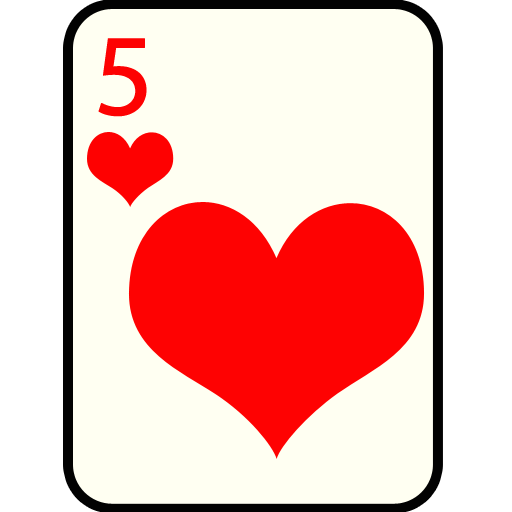
<style>
.page{position:relative;width:512px;height:512px;background:#fffff2}
.page>*{position:absolute;margin:0}
.t1{font:200px "MyriadPro-Regular";letter-spacing:-0.05em;color:#fd0202;font-variant:small-caps;font-weight:bold}
</style>
<div class="page">
<p class="t1" style="left:98px;top:38px;width:49px;height:79px">5</p>
</div>
